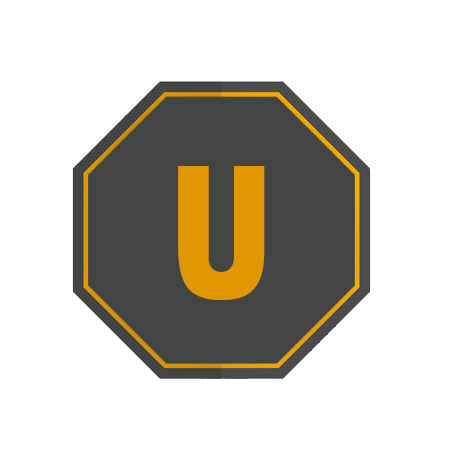
<style>
.page{position:relative;width:450px;height:463px;background:#ffffff}
.page>*{position:absolute;margin:0}
.t1{font:200px "TwCenMT-CondensedExtraBold";color:#e19702}
</style>
<div class="page">
<p class="t1" style="left:178px;top:166px;width:87px;height:134px">U</p>
</div>
